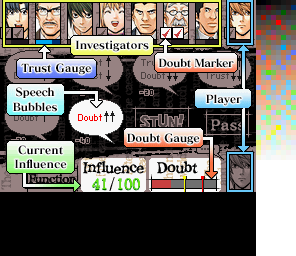
<style>
.page{position:relative;width:296px;height:256px;background:#000000}
.page>*{position:absolute;margin:0}
.t1{font:11px "MatissePro-EB";letter-spacing:-0.01em;color:#000000}
.t2{font:11px "MatissePro-EB";letter-spacing:-0.05em;color:#000000}
.t3{font:11px/15px "MatissePro-EB";letter-spacing:-0.025em;color:#000000}
.t4{font:11px/15px "MatissePro-EB";letter-spacing:-0.05em;color:#000000}
.t5{font:11px "MatissePro-EB";letter-spacing:-0.025em;color:#000000}
.t6{font:11px/14px "MatissePro-EB";letter-spacing:-0.01em;color:#000000}
</style>
<div class="page">
<p class="t1" style="left:75px;top:40px;width:74px;height:12px">Investigators</p>
<p class="t1" style="left:21px;top:63px;width:70px;height:12px">Trust Gauge</p>
<p class="t2" style="left:158px;top:58px;width:76px;height:10px">Doubt Marker</p>
<p class="t3" style="left:13px;top:87px;width:44px;height:25px;text-align:center">Sp<span class="t4">eec</span>h<br>Bubbles</p>
<p class="t1" style="left:206px;top:94px;width:36px;height:12px">Player</p>
<p class="t5" style="left:127px;top:133px;width:73px;height:12px">Doubt Gauge</p>
<p class="t6" style="left:14px;top:145px;width:53px;height:24px;text-align:center">Current<br>Influence</p>
</div>
